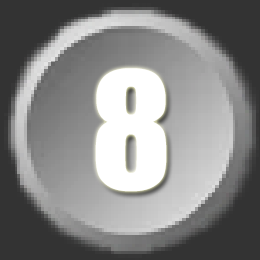
<style>
.page{position:relative;width:260px;height:260px;background:#333333}
.page>*{position:absolute;margin:0}
.t1{font:150px "Impact";color:#ffffff;text-transform:uppercase}
</style>
<div class="page">
<p class="t1" style="left:95px;top:68px;width:72px;height:124px">8</p>
</div>
